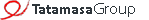
<style>
.page{position:relative;width:149px;height:20px;background:#ffffff}
.page>*{position:absolute;margin:0}
.t1{font:16.1px "Calibri-Bold";color:#2e363b}
.t2{font:16.1px "ErasITC-Light";color:#2e363b}
</style>
<div class="page">
<p class="t1" style="left:32px;top:3px;width:103px;height:14px">Tatamasa<span class="t2">Group</span></p>
</div>
